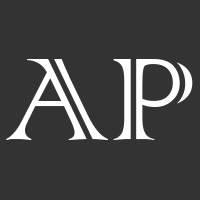
<style>
.page{position:relative;width:200px;height:200px;background:#333333}
.page>*{position:absolute;margin:0}
.t1{font:155.1px "ColonnaMT";color:#ffffff}
</style>
<div class="page">
<p class="t1" style="left:6px;top:59px;width:187px;height:81px">AP</p>
</div>
